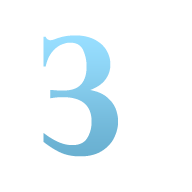
<style>
.page{position:relative;width:192px;height:192px;background:#ffffff}
.page>*{position:absolute;margin:0}
.t1{font:164.4px "PerpetuaTitlingMT-Bold";color:#80c6e7}
</style>
<div class="page">
<p class="t1" style="left:43px;top:35px;width:75px;height:122px">3</p>
</div>
